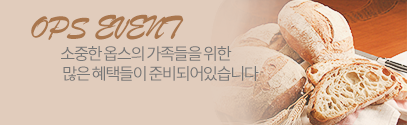
<style>
.page{position:relative;width:407px;height:125px;background:#e1ccbc}
.page>*{position:absolute;margin:0}
.t1{font:33.3px "BrushScriptMT";letter-spacing:-0.05em;color:#a9764d;text-transform:uppercase}
.t2{font:16.7px "NotoSansKR-Regular";letter-spacing:-0.1em;color:#777777;text-transform:uppercase}
</style>
<div class="page">
<p class="t1" style="left:31px;top:14px;width:153px;height:26px">OPS EVENT</p>
<p class="t2" style="left:61px;top:46px;width:198px;height:35px">소중한 옵스의 가족들을 위한<br> 많은 혜택들이 준비되어있습니다</p>
</div>
